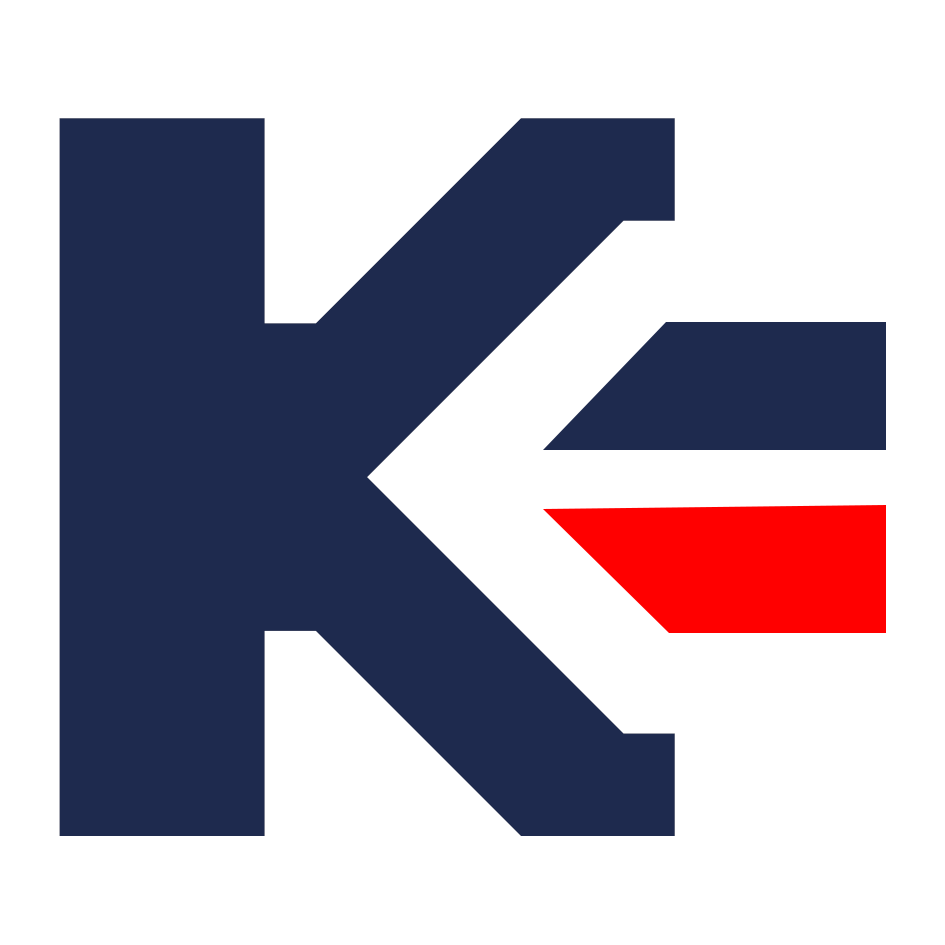
<style>
.page{position:relative;width:945px;height:945px;background:#ffffff}
.page>*{position:absolute;margin:0}
.t1{font:1050px "Commodore-64-Rounded";letter-spacing:0.2em;color:#1e2a4e}
</style>
<div class="page">
<p class="t1" style="left:59px;top:118px;width:616px;height:718px">K</p>
</div>
